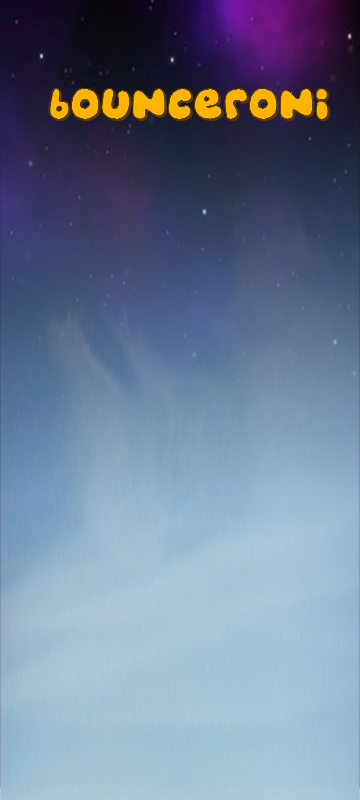
<style>
.page{position:relative;width:360px;height:800px}
.page>*{position:absolute;margin:0}
.t1{font:30px "Bubblegums";color:#513900}
</style>
<div class="page">
<p class="t1" style="left:48px;top:88px;width:282px;height:33px">Bounceroni</p>
</div>
